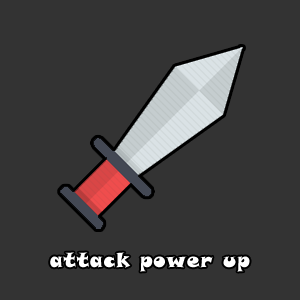
<style>
.page{position:relative;width:300px;height:300px;background:#333333}
.page>*{position:absolute;margin:0}
.t1{font:20px "SnapITC-Regular";letter-spacing:0.05em;color:#ffffff}
</style>
<div class="page">
<p class="t1" style="left:50px;top:252px;width:200px;height:20px">attack power up</p>
</div>
